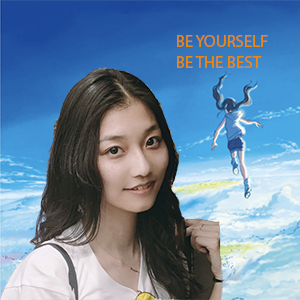
<style>
.page{position:relative;width:300px;height:300px}
.page>*{position:absolute;margin:0}
.t1{font:16.8px "MyriadPro-Regular";color:#ea8712}
</style>
<div class="page">
<p class="t1" style="left:177px;top:35px;width:91px;height:33px">BE YOURSELF<br>BE THE BEST</p>
</div>
